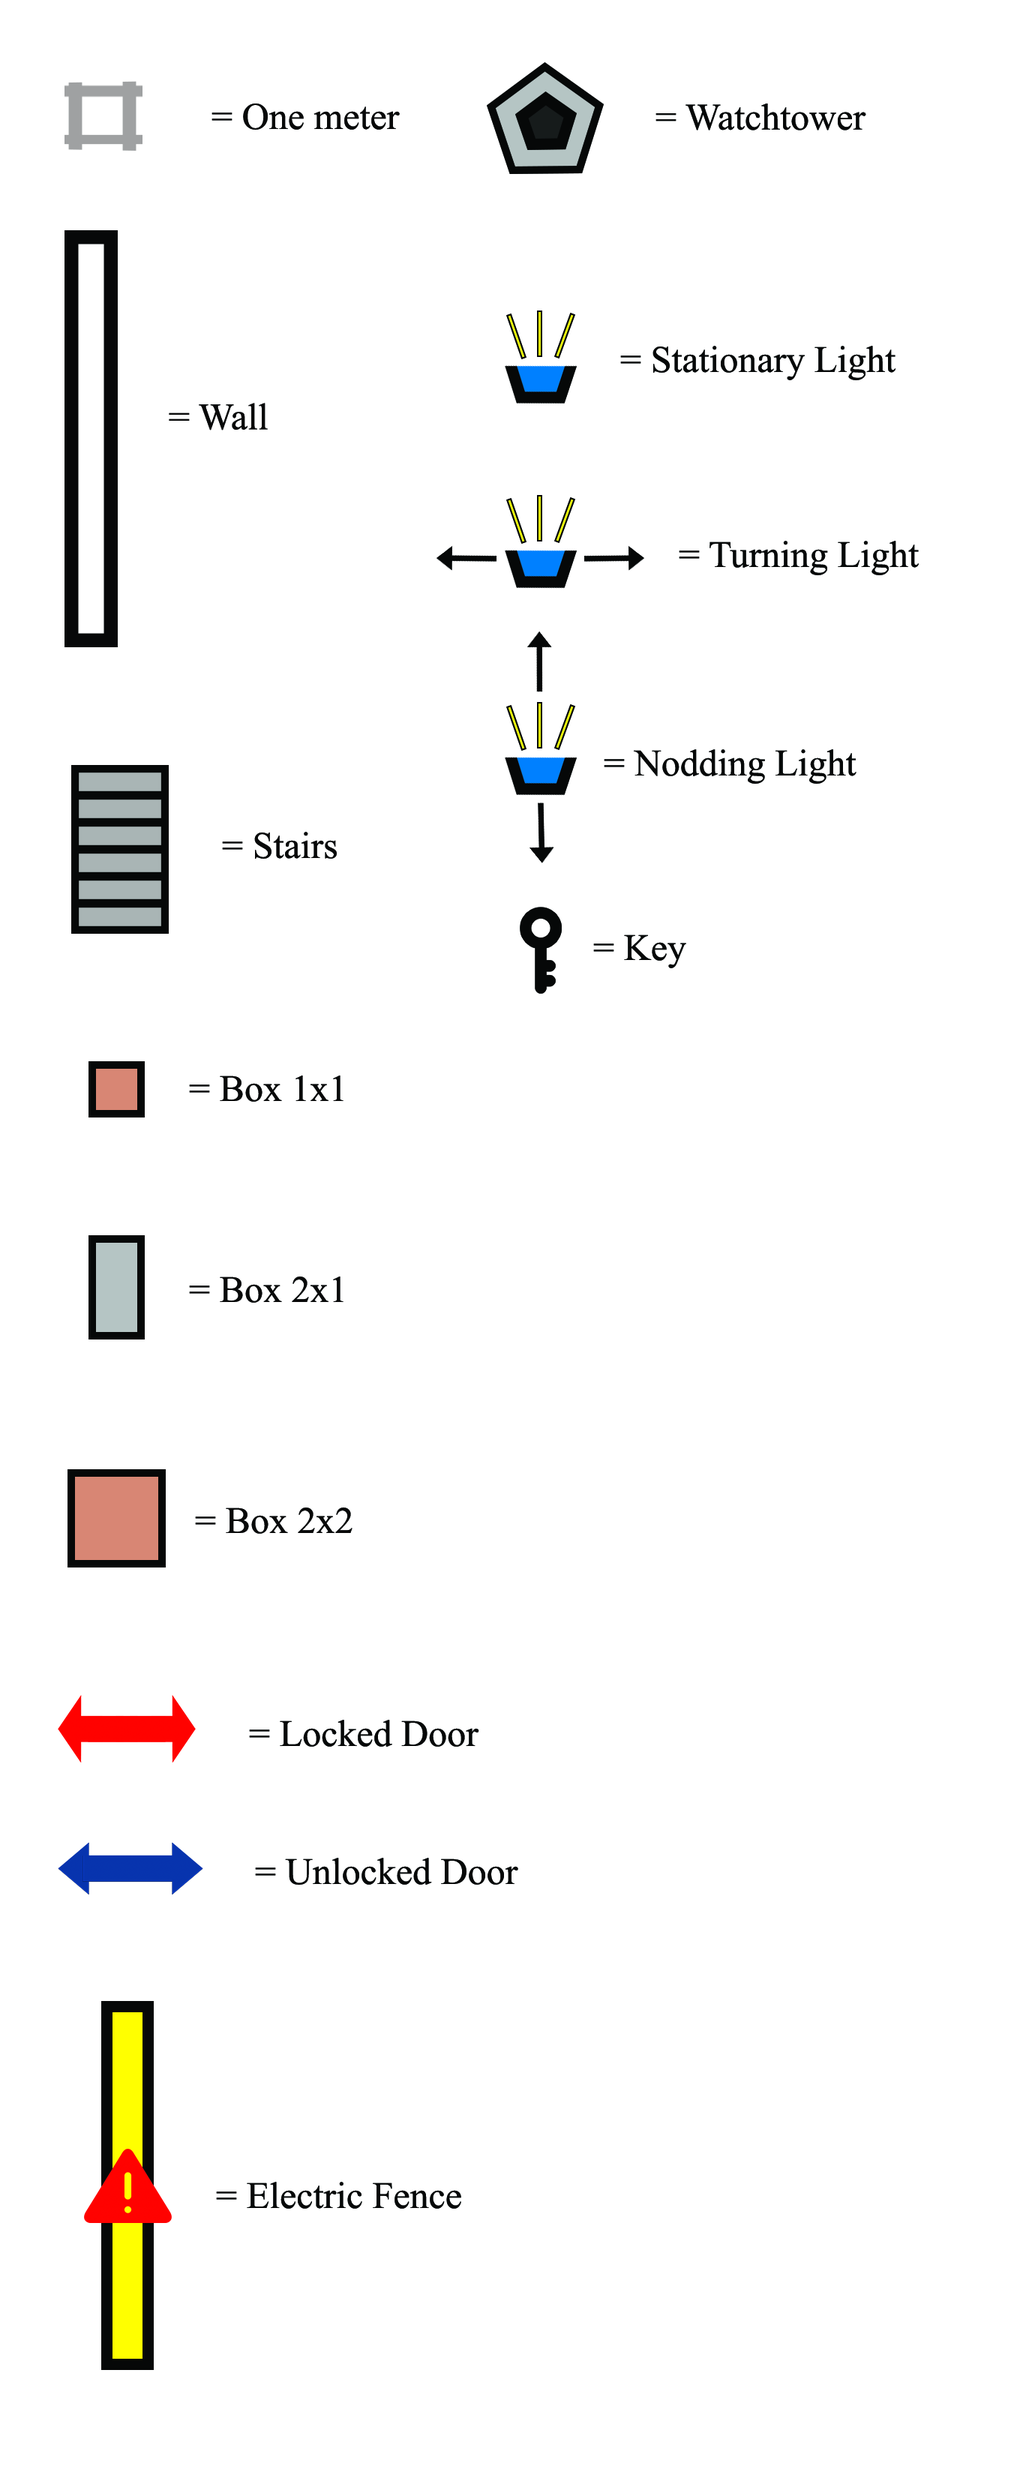
<style>
.page{position:relative;width:1026px;height:2475px;background:#ffffff}
.page>*{position:absolute;margin:0}
.t1{font:9px "TimesNewRomanPSMT";color:#08090a}
.t2{font:9px "TimesNewRomanPSMT";color:#060808}
</style>
<div class="page">
<p class="t1" style="left:212px;top:104px;width:188px;height:26px">= One meter</p>
<p class="t2" style="left:656px;top:104px;width:210px;height:26px">= Watchtower</p>
<p class="t2" style="left:620px;top:346px;width:276px;height:34px">= Stationary Light</p>
<p class="t1" style="left:169px;top:403px;width:99px;height:27px">= Wall</p>
<p class="t2" style="left:679px;top:541px;width:241px;height:34px">= Turning Light</p>
<p class="t2" style="left:604px;top:749px;width:252px;height:35px">= Nodding Light</p>
<p class="t1" style="left:222px;top:832px;width:115px;height:27px">= Stairs</p>
<p class="t2" style="left:593px;top:934px;width:93px;height:34px">= Key</p>
<p class="t1" style="left:189px;top:1076px;width:155px;height:26px">= Box 1x1</p>
<p class="t1" style="left:189px;top:1276px;width:155px;height:27px">= Box 2x1</p>
<p class="t1" style="left:195px;top:1508px;width:157px;height:26px">= Box 2x2</p>
<p class="t2" style="left:249px;top:1720px;width:230px;height:27px">= Locked Door</p>
<p class="t2" style="left:255px;top:1858px;width:263px;height:27px">= Unlocked Door</p>
<p class="t2" style="left:216px;top:2182px;width:245px;height:27px">= Electric Fence</p>
</div>
